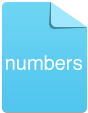
<style>
.page{position:relative;width:88px;height:113px}
.page>*{position:absolute;margin:0}
.t1{font:20px "Helvetica";color:#ffffff}
</style>
<div class="page">
<p class="t1" style="left:6px;top:55px;width:76px;height:15px">numbers</p>
</div>
